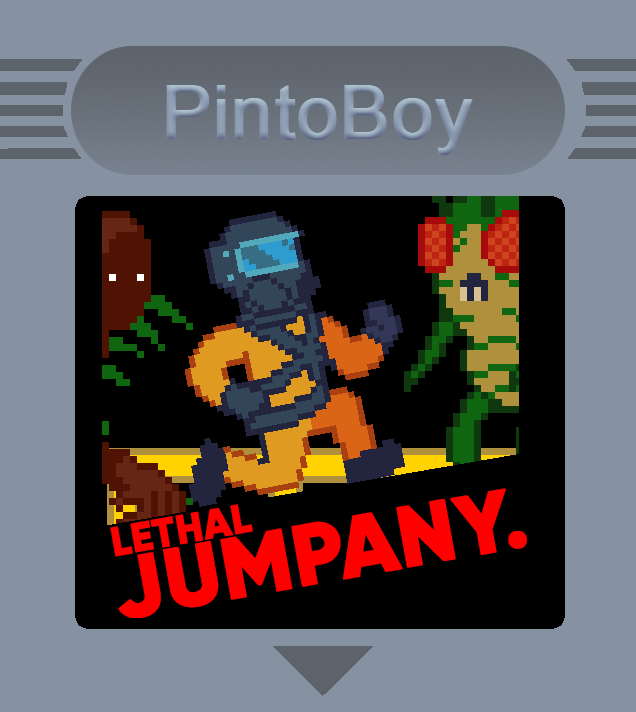
<style>
.page{position:relative;width:636px;height:712px;background:#8692a1}
.page>*{position:absolute;margin:0}
.t1{font:74px "ArialMT";color:#91a0b4;font-weight:bold}
.t2{font:85.4px "Gilroy-ExtraBold";color:#ff0000;font-weight:bold}
.t3{font:40.6px "Gilroy-ExtraBold";color:#ff0000;font-weight:bold}
</style>
<div class="page">
<p class="t1" style="left:166px;top:85px;width:307px;height:70px">PintoBoy</p>
<p class="t2" style="left:118px;top:488px;width:409px;height:130px;rotate:-10deg">JUMPANY.</p>
<p class="t3" style="left:110px;top:504px;width:143px;height:53px;rotate:-10deg">LETHAL</p>
</div>
